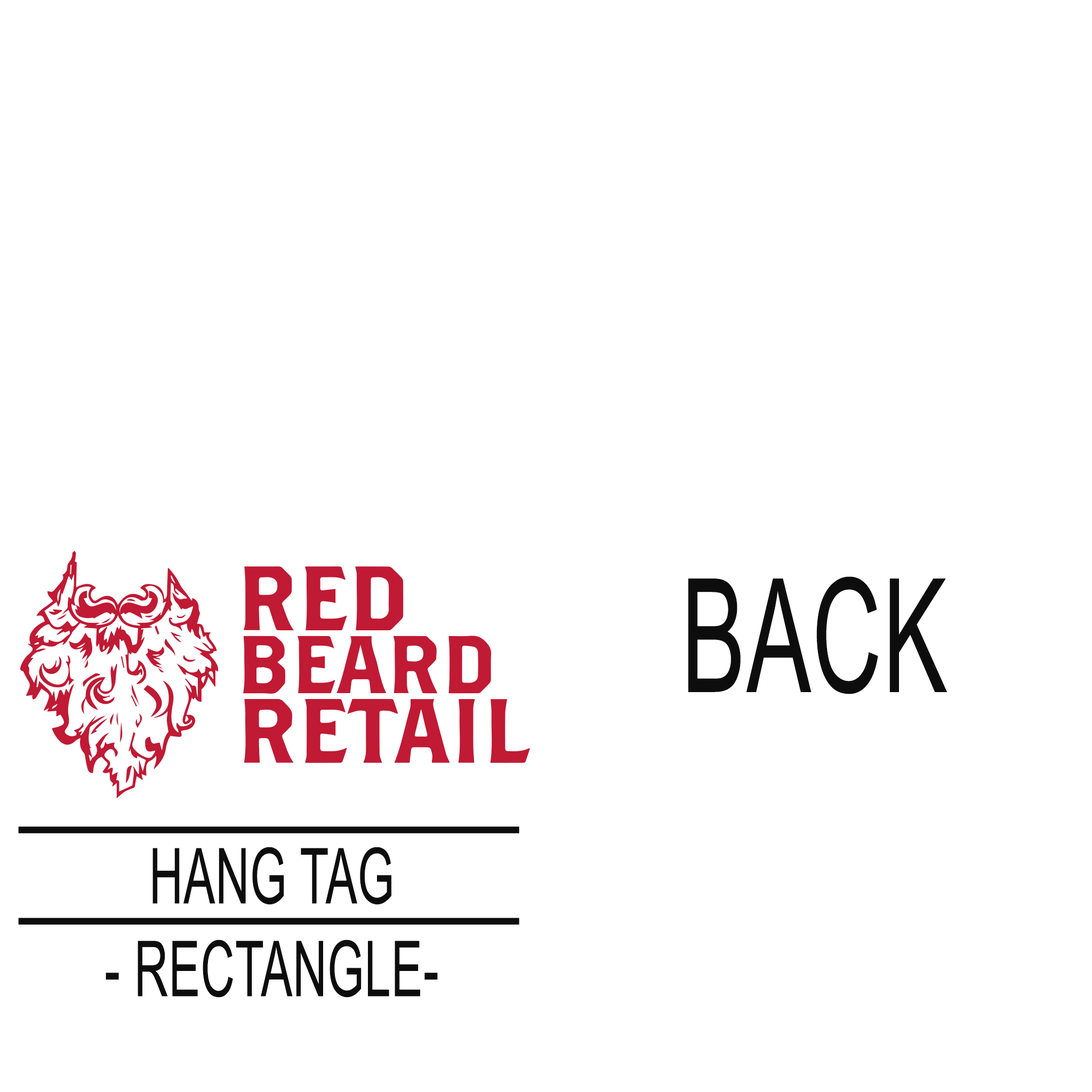
<style>
.page{position:relative;width:1092px;height:1092px;background:#ffffff}
.page>*{position:absolute;margin:0}
.t1{font:158.4px "ArialMT";letter-spacing:0.01em;color:#0d0d0d;text-transform:uppercase;scale:0.61 1}
.t2{font:77.3px "ArialMT";letter-spacing:0.01em;color:#0d0d0d;text-transform:uppercase;scale:0.61 1}
</style>
<div class="page">
<p class="t1" style="left:688px;top:576px;width:259px;height:118px">Back</p>
<p class="t2" style="left:106px;top:847px;width:332px;height:151px;text-align:center">Hang Tag<br>- Rectangle-</p>
</div>
